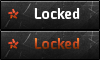
<style>
.page{position:relative;width:100px;height:60px}
.page>*{position:absolute;margin:0}
.t1{font:30px "Exo-Bold";letter-spacing:0.025em}
.t2{font:14px "Exo-Bold";letter-spacing:0.025em;color:#ffffff}
.t3{font:14px "Exo-Bold";letter-spacing:0.025em}
</style>
<div class="page">
<p class="t1" style="left:8px;top:8px;width:11px;height:11px">*</p>
<p class="t2" style="left:34px;top:7px;width:46px;height:12px">Locked</p>
<p class="t1" style="left:8px;top:38px;width:11px;height:11px">*</p>
<p class="t3" style="left:34px;top:37px;width:46px;height:12px">Locked</p>
</div>
